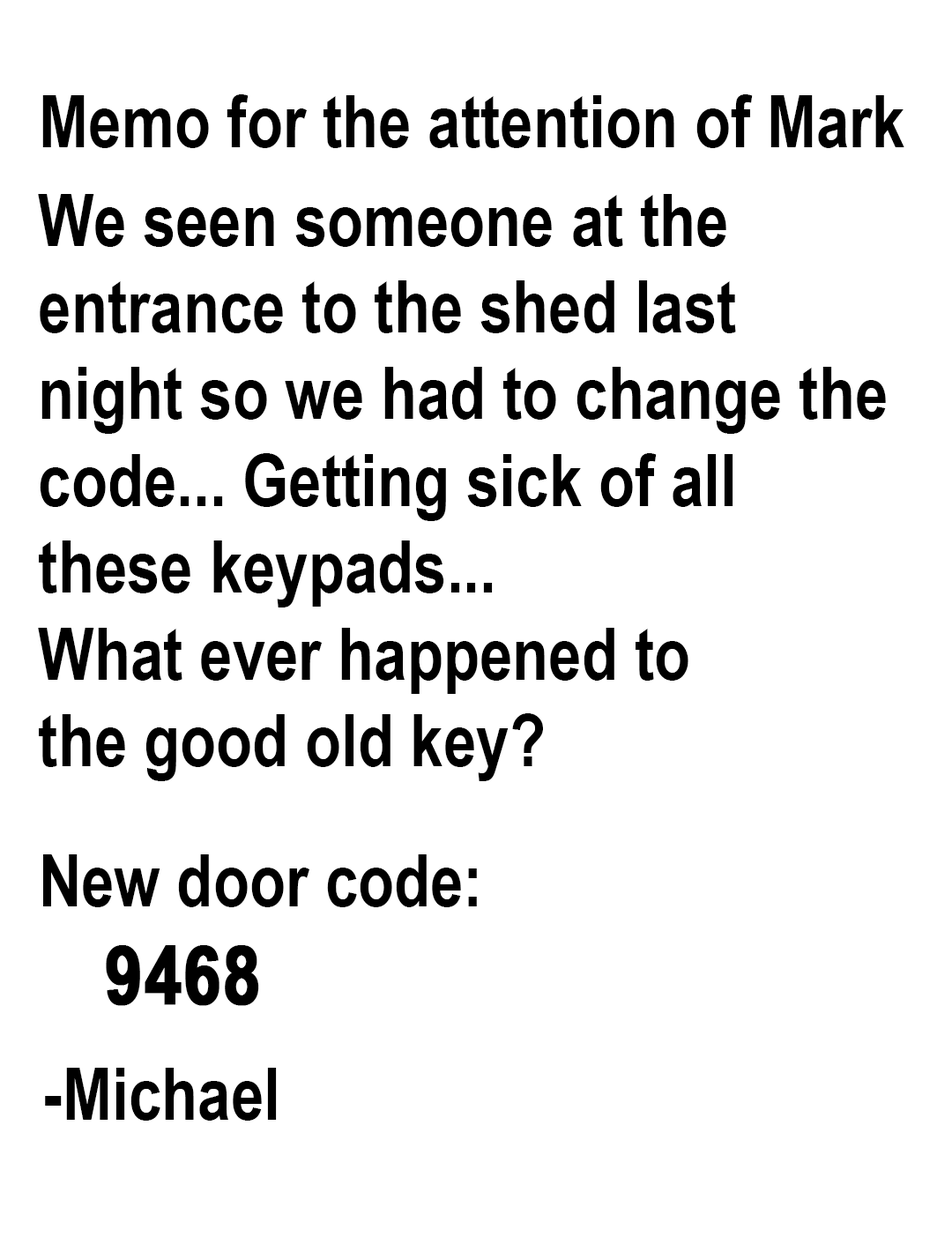
<style>
.page{position:relative;width:952px;height:1252px;background:#ffffff}
.page>*{position:absolute;margin:0}
.t1{font:72.3px "ArialNarrow-Bold";color:#000000}
.t2{font:81.1px "ArialNarrow-Bold";color:#000000;font-weight:bold}
</style>
<div class="page">
<p class="t1" style="left:42px;top:94px;width:863px;height:54px">Memo for the attention of Mark</p>
<p class="t1" style="left:38px;top:194px;width:848px;height:587px">We seen someone at the <br>entrance to the shed last <br>night so we had to change the <br>code... Getting sick of all <br>these keypads... <br>What ever happened to <br>the good old key?</p>
<p class="t1" style="left:43px;top:854px;width:434px;height:152px">New door code:<br>    <span class="t2">9468</span></p>
<p class="t1" style="left:45px;top:1068px;width:232px;height:53px">-Michael</p>
</div>
